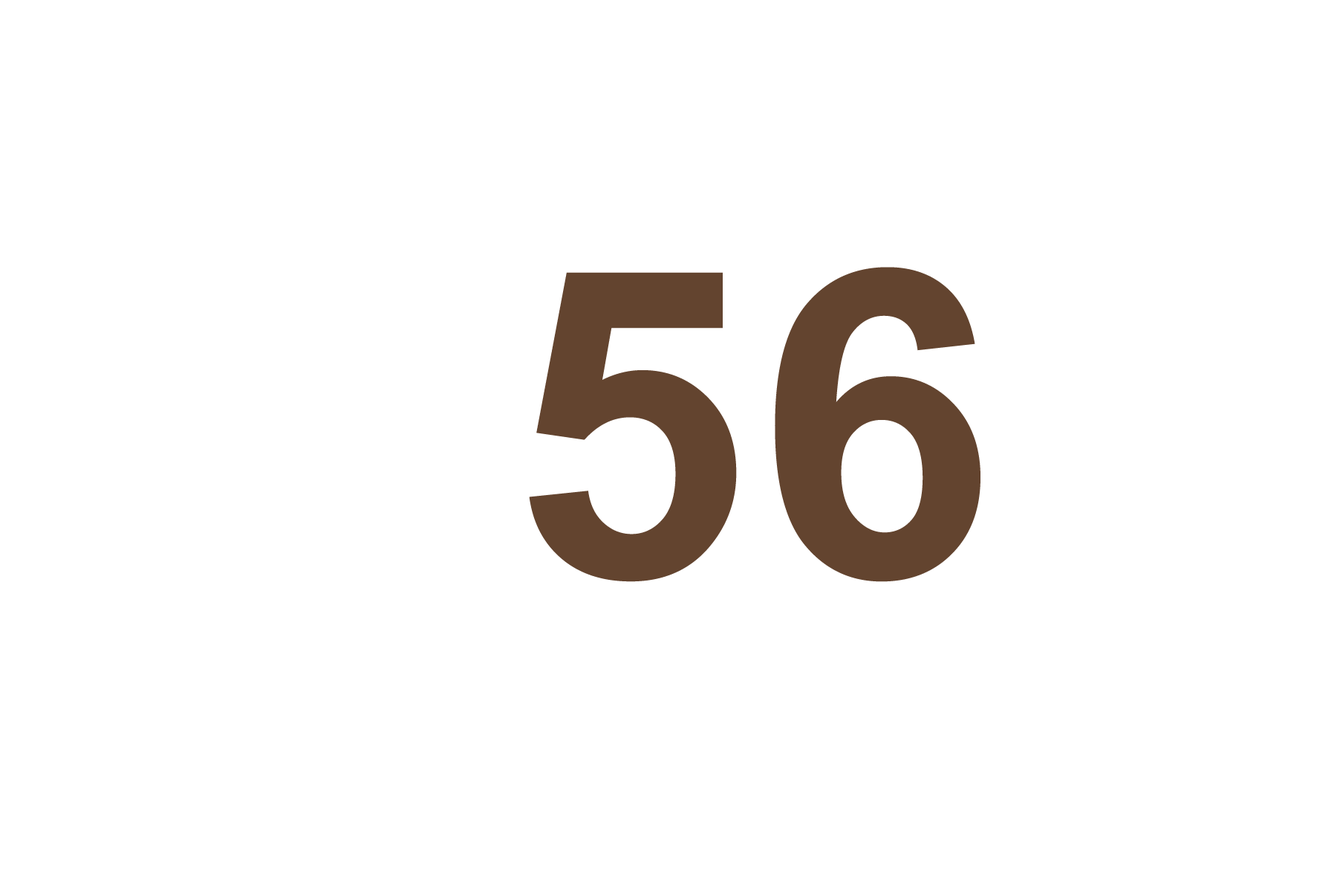
<style>
.page{position:relative;width:1337px;height:892px;background:#ffffff}
.page>*{position:absolute;margin:0}
.t1{font:429.6px "Arial-BoldMT";color:#63442f}
</style>
<div class="page">
<p class="t1" style="left:529px;top:267px;width:452px;height:315px">56</p>
</div>
